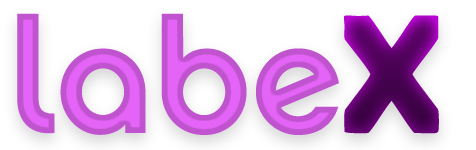
<style>
.page{position:relative;width:476px;height:150px;background:#ffffff}
.page>*{position:absolute;margin:0}
.t1{font:160px "Chalet-NewYorkNineteenSeventy"}
.t2{font:170.9px "BerlinSansFBDemi-Bold"}
</style>
<div class="page">
<p class="t1" style="left:17px;top:13px;width:322px;height:122px">labe</p>
<p class="t2" style="left:344px;top:15px;width:95px;height:119px">X</p>
</div>
